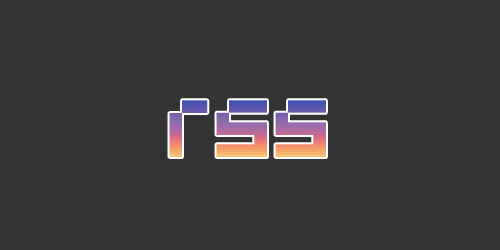
<style>
.page{position:relative;width:500px;height:250px;background:#333333}
.page>*{position:absolute;margin:0}
.t1{font:90px "StopwatchRegular"}
</style>
<div class="page">
<p class="t1" style="left:169px;top:100px;width:157px;height:57px">RSS</p>
</div>
